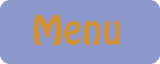
<style>
.page{position:relative;width:160px;height:64px;background:#8c97cb}
.page>*{position:absolute;margin:0}
.t1{font:36px "HoboStd";color:#cf9336}
</style>
<div class="page">
<p class="t1" style="left:34px;top:15px;width:86px;height:30px">Menu</p>
</div>
